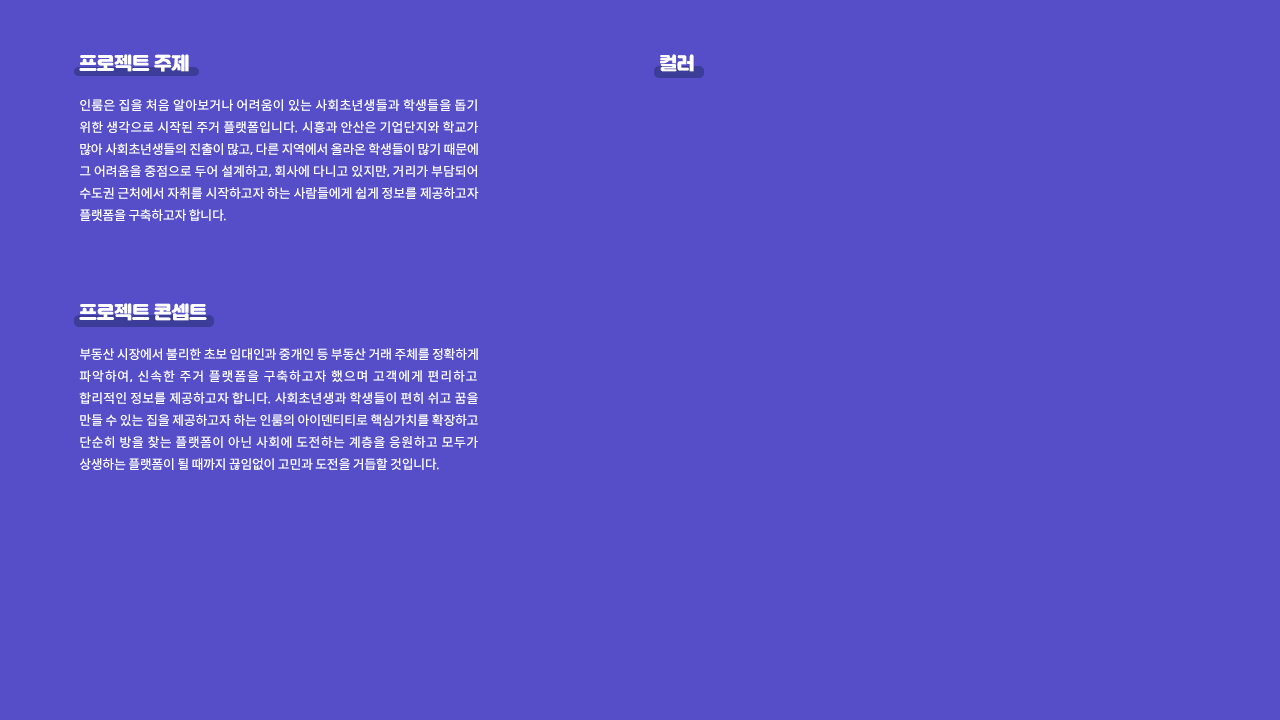
<style>
.page{position:relative;width:1280px;height:720px;background:#564ec8}
.page>*{position:absolute;margin:0}
.t1{font:18px "Jalnan";letter-spacing:-0.025em;color:#ffffff}
.t2{font:13px/22px "SpoqaHanSansNeo-Medium";letter-spacing:-0.02em;color:#ffffff}
</style>
<div class="page">
<p class="t1" style="left:79px;top:54px;width:110px;height:18px">프로젝트 주제</p>
<p class="t1" style="left:660px;top:54px;width:34px;height:18px">컬러</p>
<p class="t2" style="left:80px;top:99px;width:399px;height:122px;text-align:justify">인룸은 집을 처음 알아보거나 어려움이 있는 사회초년생들과 학생들을 돕기 위한 생각으로 시작된 주거 플랫폼입니다. 시흥과 안산은 기업단지와 학교가 많아 사회초년생들의 진출이 많고, 다른 지역에서 올라온 학생들이 많기 때문에 그 어려움을 중점으로 두어 설계하고, 회사에 다니고 있지만, 거리가 부담되어 수도권 근처에서 자취를 시작하고자 하는 사람들에게 쉽게 정보를 제공하고자 플랫폼을 구축하고자 합니다.</p>
<p class="t1" style="left:79px;top:303px;width:128px;height:18px">프로젝트 콘셉트</p>
<p class="t2" style="left:79px;top:348px;width:399px;height:122px;text-align:justify">부동산 시장에서 불리한 초보 임대인과 중개인 등 부동산 거래 주체를 정확하게 파악하여, 신속한 주거 플랫폼을 구축하고자 했으며 고객에게 편리하고 합리적인 정보를 제공하고자 합니다. 사회초년생과 학생들이 편히 쉬고 꿈을 만들 수 있는 집을 제공하고자 하는 인룸의 아이덴티티로 핵심가치를 확장하고 단순히 방을 찾는 플랫폼이 아닌 사회에 도전하는 계층을 응원하고 모두가 상생하는 플랫폼이 될 때까지 끊임없이 고민과 도전을 거듭할 것입니다.</p>
</div>
